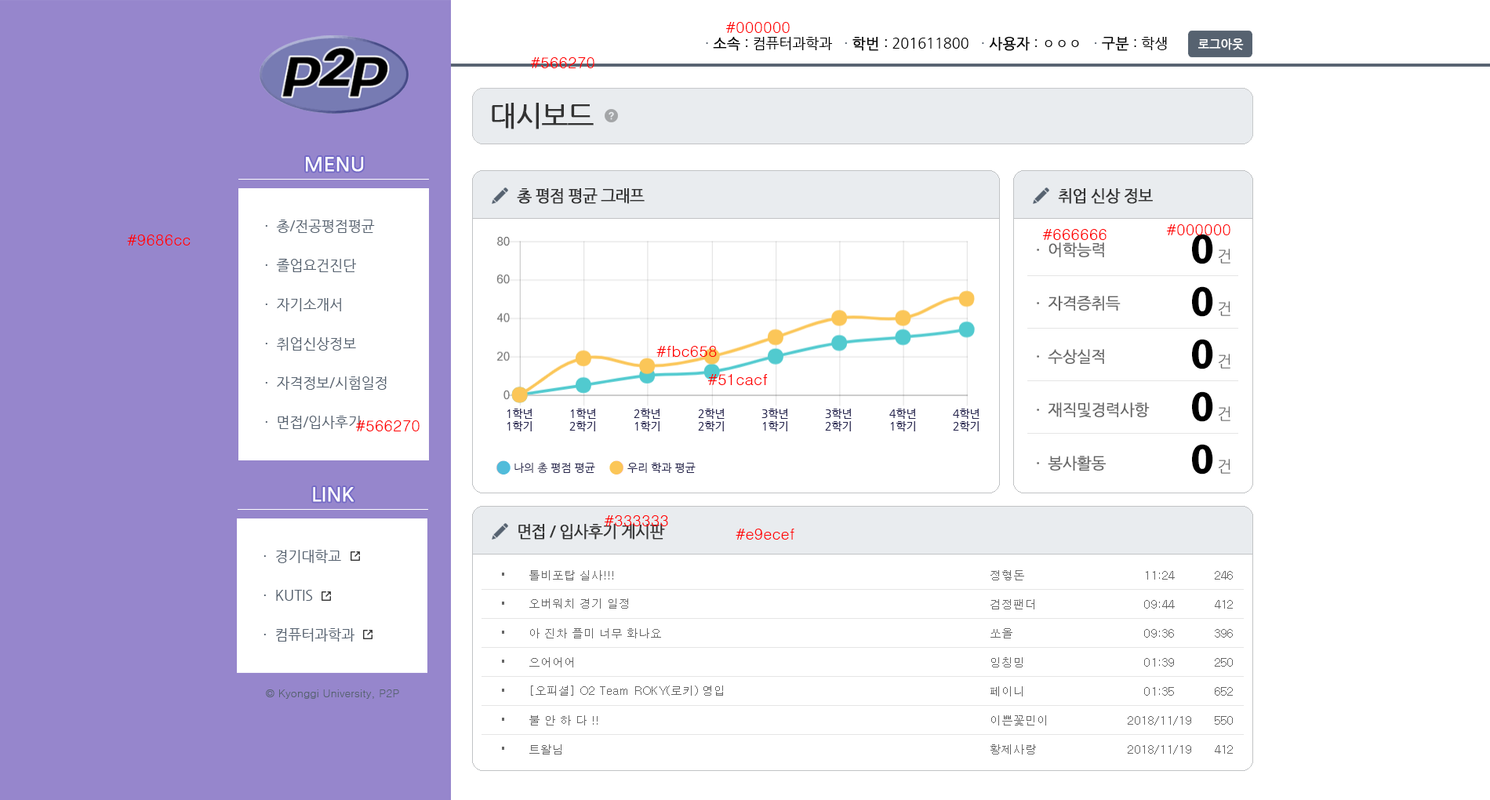
<style>
.page{position:relative;width:1490px;height:800px;background:#ffffff}
.page>*{position:absolute;margin:0}
.t1{font:15.7px "Dotum";color:#ff0000}
.t2{font:14.1px "NanumGothic";color:#000000}
.t3{font:14.1px "NanumGothic";color:#566270}
.t4{font:14.1px "NanumGothic";color:#000000;font-weight:bold}
.t5{font:11.8px "NanumGothic";color:#ffffff;font-weight:bold}
.t6{font:28.2px "NanumGothic";letter-spacing:-0.05em;color:#333333;font-weight:bold}
.t7{font:19.6px "NanumGothic";color:#ffffff;font-weight:bold}
.t8{font:15.7px "NanumGothic";letter-spacing:-0.05em;color:#333333;font-weight:bold}
.t9{font:14.1px/39.2px "NanumGothic";color:#566270}
.t10{font:32.9px "HeadlineR-HM";letter-spacing:-0.05em;color:#000000}
.t11{font:15.7px/53.3px "NanumGothic";letter-spacing:-0.05em;color:#666666;font-weight:bold}
.t12{font:15.7px "NanumGothic";letter-spacing:-0.05em;color:#666666}
.t13{font:11px "NanumGothic";color:#25244c}
.t14{font:11px "Dotum";color:#566270}
</style>
<div class="page">
<p class="t1" style="left:726px;top:22px;width:64px;height:11px">#000000</p>
<p class="t2" style="left:706px;top:37px;width:461px;height:14px"><span class="t3">· </span><span class="t4">소속</span> : 컴퓨터과학과   <span class="t3">· </span><span class="t4">학번 </span>: 201611800   <span class="t3">· </span><span class="t4">사용자</span> : ㅇㅇㅇ   <span class="t3">· </span><span class="t4">구분</span> : 학생</p>
<p class="t5" style="left:1198px;top:38px;width:46px;height:12px">로그아웃</p>
<p class="t1" style="left:530px;top:57px;width:65px;height:11px">#566270</p>
<p class="t6" style="left:492px;top:103px;width:102px;height:26px">대시보드</p>
<p class="t7" style="left:306px;top:157px;width:58px;height:15px">MENU</p>
<p class="t8" style="left:517px;top:188px;width:128px;height:16px">총 평점 평균 그래프</p>
<p class="t8" style="left:1058px;top:188px;width:95px;height:16px">취업 신상 정보</p>
<p class="t9" style="left:265px;top:220px;width:122px;height:209px">·  총/전공평점평균<br>·  졸업요건진단<br>·  자기소개서<br>·  취업신상정보<br>·  자격정보/시험일정<br>·  면접/입사후기</p>
<p class="t1" style="left:1042px;top:229px;width:65px;height:11px">#666666</p>
<p class="t1" style="left:1166px;top:224px;width:65px;height:11px">#000000</p>
<p class="t10" style="left:1192px;top:234px;width:21px;height:30px">0</p>
<p class="t1" style="left:127px;top:235px;width:64px;height:11px">#9686cc</p>
<p class="t11" style="left:1037px;top:242px;width:113px;height:229px">·  어학능력<br>·  자격증취득<br>·  수상실적<br>·  재직및경력사항<br>·  봉사활동</p>
<p class="t12" style="left:1219px;top:249px;width:12px;height:15px">건</p>
<p class="t10" style="left:1192px;top:286px;width:21px;height:31px">0</p>
<p class="t12" style="left:1219px;top:301px;width:12px;height:15px">건</p>
<p class="t10" style="left:1192px;top:339px;width:21px;height:30px">0</p>
<p class="t1" style="left:657px;top:346px;width:60px;height:11px">#fbc658</p>
<p class="t12" style="left:1219px;top:354px;width:12px;height:15px">건</p>
<p class="t1" style="left:708px;top:374px;width:60px;height:11px">#51cacf</p>
<p class="t10" style="left:1192px;top:391px;width:21px;height:31px">0</p>
<p class="t12" style="left:1219px;top:406px;width:12px;height:15px">건</p>
<p class="t1" style="left:355px;top:420px;width:65px;height:11px">#566270</p>
<p class="t10" style="left:1192px;top:444px;width:21px;height:31px">0</p>
<p class="t12" style="left:1219px;top:459px;width:12px;height:15px">건</p>
<p class="t13" style="left:515px;top:462px;width:80px;height:12px">나의 총 평점 평균</p>
<p class="t13" style="left:628px;top:463px;width:68px;height:10px">우리 학과 평균</p>
<p class="t7" style="left:313px;top:487px;width:41px;height:15px">LINK</p>
<p class="t1" style="left:604px;top:515px;width:64px;height:11px">#333333</p>
<p class="t8" style="left:518px;top:524px;width:147px;height:16px">면접 / 입사후기 게시판</p>
<p class="t1" style="left:736px;top:529px;width:59px;height:11px">#e9ecef</p>
<p class="t9" style="left:264px;top:550px;width:91px;height:92px">·  경기대학교<br>·  KUTIS<br>·  컴퓨터과학과</p>
<p class="t14" style="left:266px;top:689px;width:133px;height:10px">© Kyonggi University, P2P</p>
</div>
